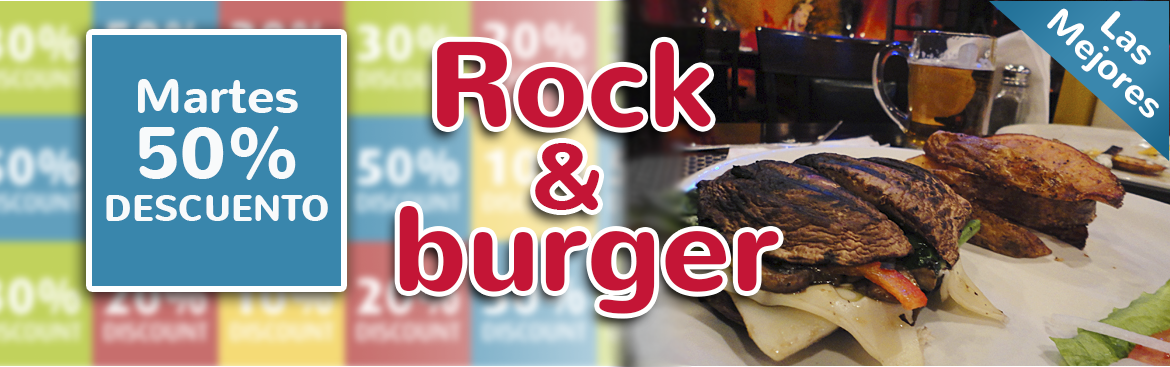
<style>
.page{position:relative;width:1170px;height:367px}
.page>*{position:absolute;margin:0}
.t1{font:36px/34px "Nunito-Bold";color:#ffffff}
.t2{font:120px/82px "Nunito-Bold";color:#c41536}
.t3{font:110px/94px "Nunito-Bold";color:#c41536}
.t4{font:90px/82px "Nunito-Bold";color:#c41536}
.t5{font:36px "Nunito-Bold";color:#f8fafb}
.t6{font:48px/65px "Nunito-Bold";color:#f8fafb}
.t7{font:72px/65px "Nunito-Bold";color:#f8fafb}
</style>
<div class="page">
<p class="t1" style="left:1047px;top:8px;width:112px;height:110px;text-align:center;rotate:42deg">Las <br>Mejores</p>
<p class="t2" style="left:399px;top:41px;width:380px;height:273px"><span class="t3"> </span>Rock <br>    <span class="t4">&amp; <br></span>burgerr</p>
<p class="t5" style="left:106px;top:79px;width:222px;height:142px;text-align:center"><span class="t6">Martes<br></span><span class="t7">50%<br></span>DESCUENTO</p>
</div>
